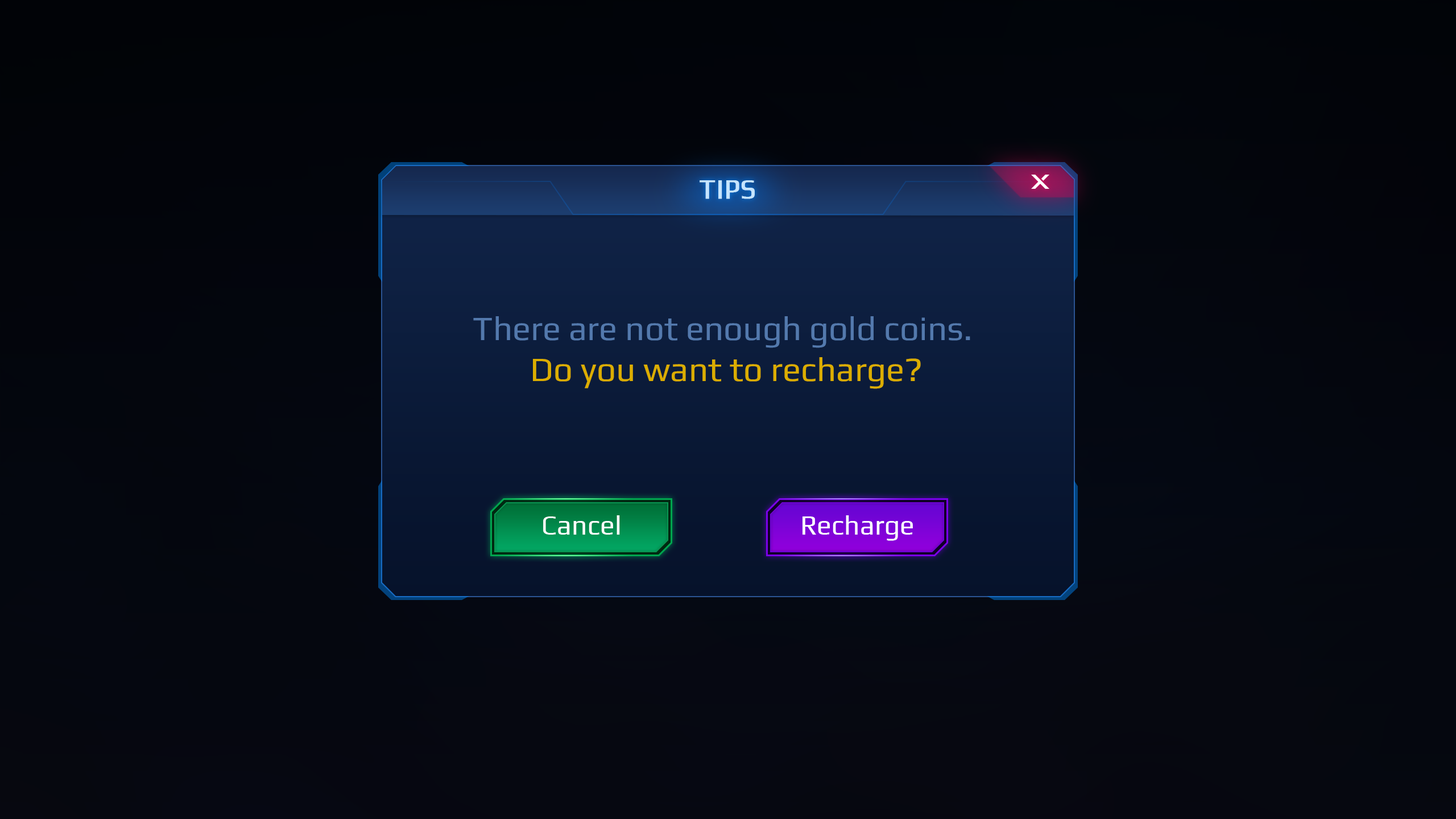
<style>
.page{position:relative;width:1456px;height:819px}
.page>*{position:absolute;margin:0}
.t1{font:27.3px "Play-Regular";color:#ccecff;font-weight:bold}
.t2{font:34.1px/40.9px "Play-Regular";color:#5379ad}
.t3{font:34.1px/40.9px "Play-Regular";color:#dbad00}
.t4{font:27.3px "Play-Regular";color:#ffffff}
</style>
<div class="page">
<p class="t1" style="left:700px;top:180px;width:55px;height:19px">TIPS</p>
<p class="t2" style="left:473px;top:316px;width:497px;height:73px;text-align:center">There are not enough gold coins. <br><span class="t3">Do you want to recharge?</span></p>
<p class="t4" style="left:543px;top:515px;width:77px;height:20px">Cancel</p>
<p class="t4" style="left:802px;top:515px;width:111px;height:26px">Recharge</p>
</div>
